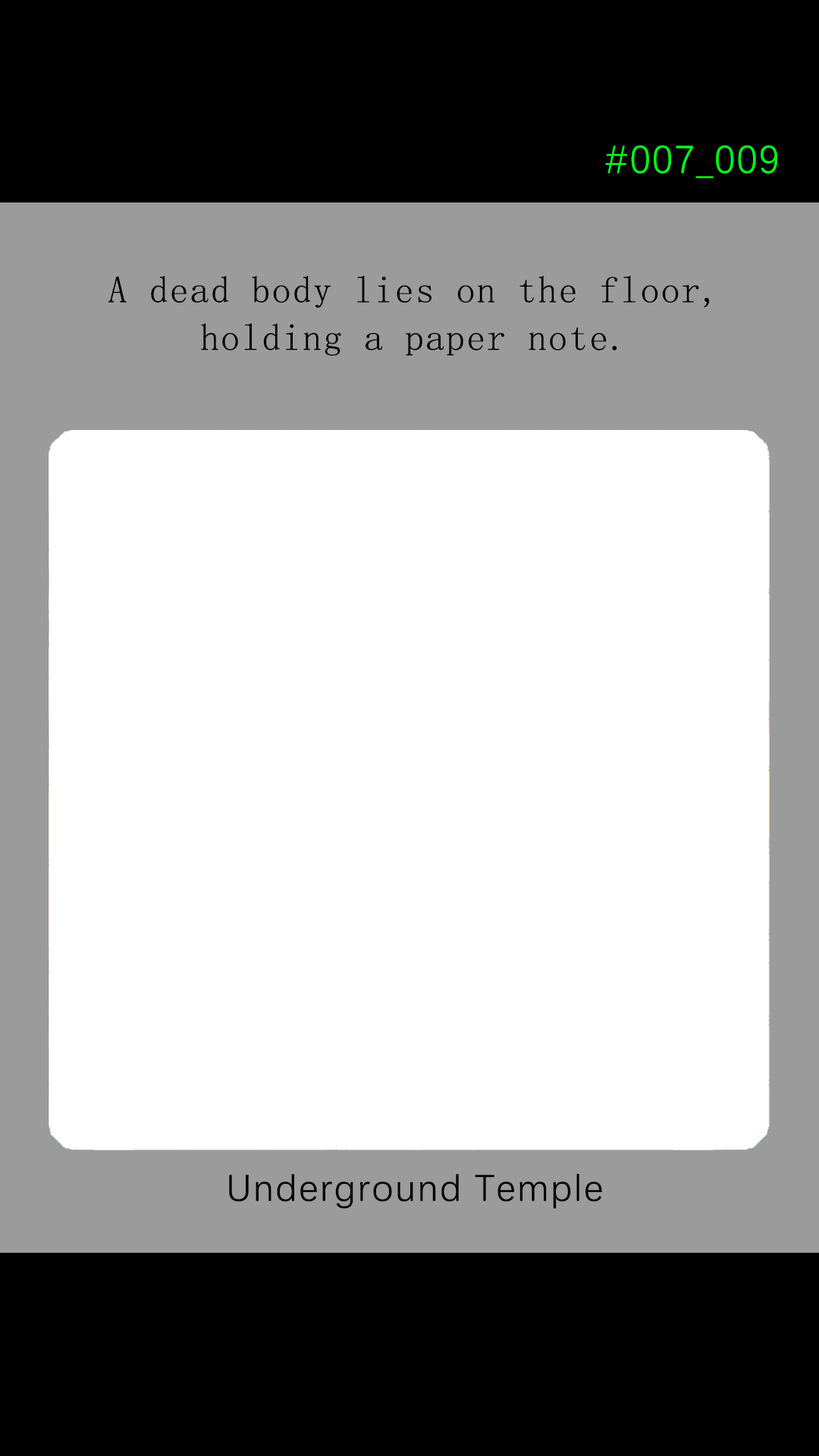
<style>
.page{position:relative;width:819px;height:1456px;background:#ffffff}
.page>*{position:absolute;margin:0}
.t1{font:39.2px "DengXian-Regular";letter-spacing:0.04em;color:#00ff1e}
.t2{font:37.9px/47.6px "SimSun";letter-spacing:0.04em;color:#000000}
.t3{font:37.9px "DengXian-Regular";letter-spacing:0.04em;color:#000000}
</style>
<div class="page">
<p class="t1" style="left:605px;top:145px;width:172px;height:33px">#007_009</p>
<p class="t2" style="left:108px;top:275px;width:602px;height:81px;text-align:center">A dead body lies on the floor,<br>holding a paper note.</p>
<p class="t3" style="left:229px;top:1174px;width:373px;height:35px">Underground Temple</p>
</div>
